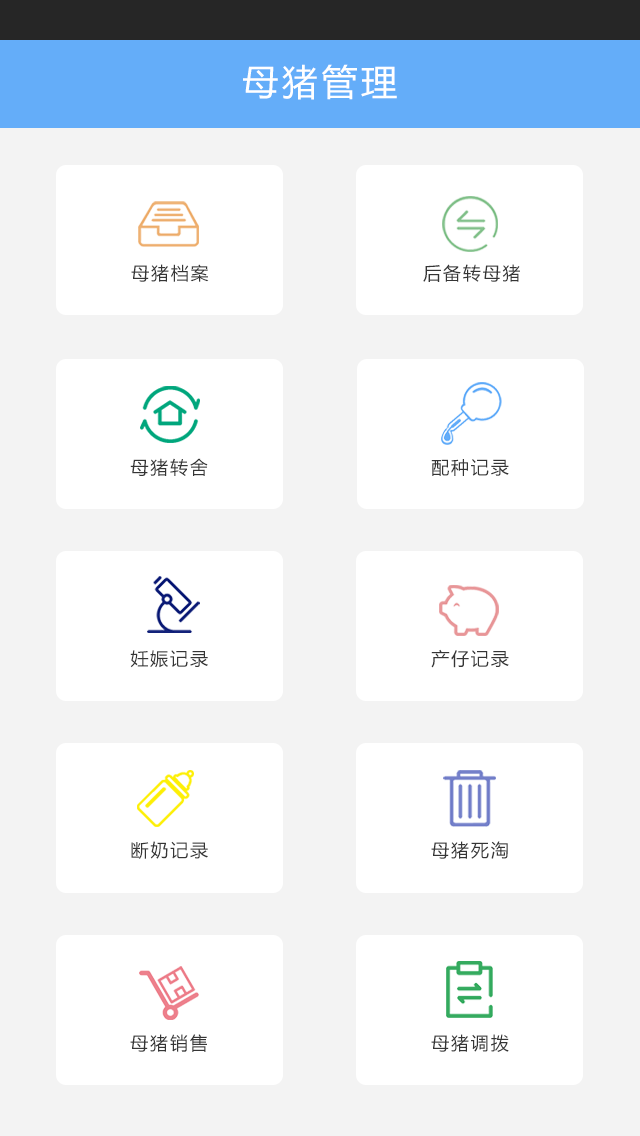
<style>
.page{position:relative;width:640px;height:1136px;background:#f3f3f3}
.page>*{position:absolute;margin:0}
.t1{font:36px "MicrosoftYaHei";letter-spacing:0.1em;color:#ffffff}
.t2{font:18px "MicrosoftYaHei";letter-spacing:0.1em;color:#353535}
</style>
<div class="page">
<p class="t1" style="left:243px;top:64px;width:154px;height:36px">母猪管理</p>
<p class="t2" style="left:131px;top:264px;width:78px;height:18px">母猪档案</p>
<p class="t2" style="left:423px;top:264px;width:97px;height:18px">后备转母猪</p>
<p class="t2" style="left:130px;top:458px;width:78px;height:18px">母猪转舍</p>
<p class="t2" style="left:431px;top:459px;width:78px;height:17px">配种记录</p>
<p class="t2" style="left:130px;top:650px;width:78px;height:18px">妊娠记录</p>
<p class="t2" style="left:431px;top:649px;width:78px;height:19px">产仔记录</p>
<p class="t2" style="left:131px;top:841px;width:77px;height:18px">断奶记录</p>
<p class="t2" style="left:431px;top:841px;width:77px;height:18px">母猪死淘</p>
<p class="t2" style="left:130px;top:1034px;width:77px;height:18px">母猪销售</p>
<p class="t2" style="left:431px;top:1034px;width:78px;height:18px">母猪调拨</p>
</div>
